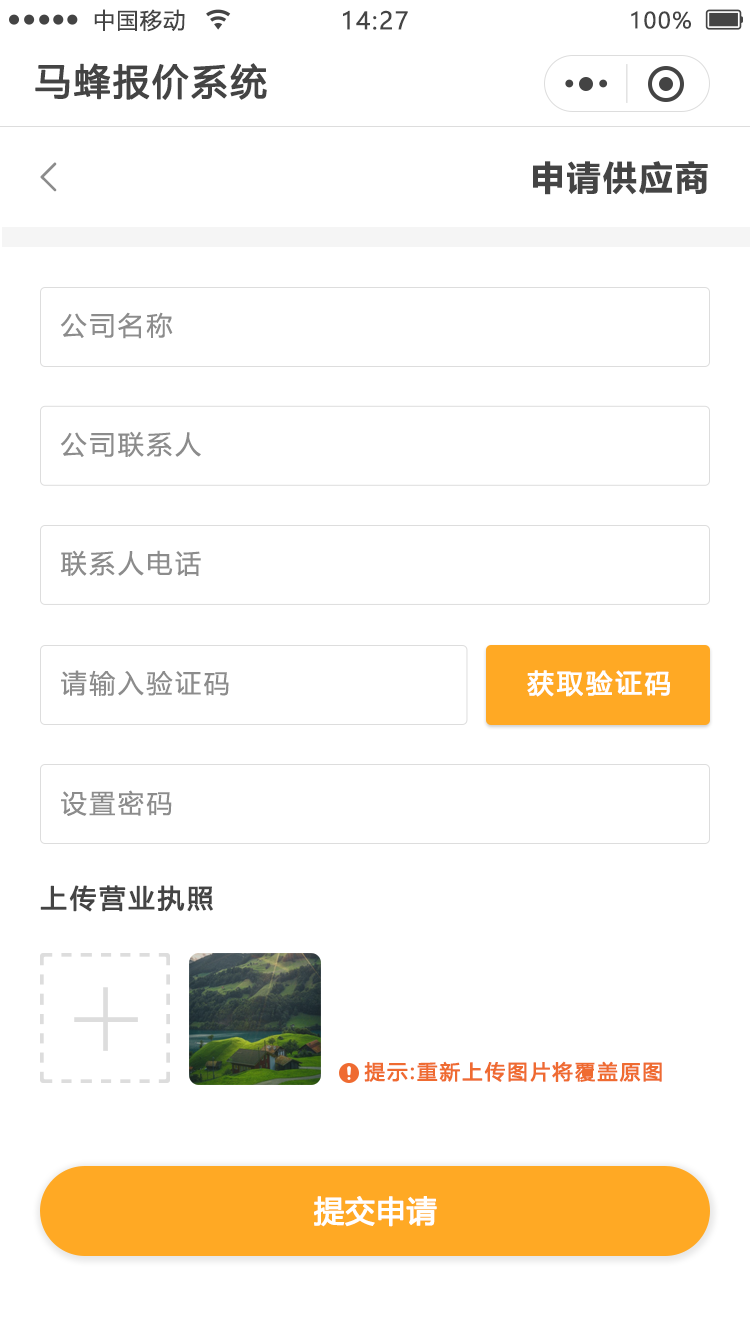
<style>
.page{position:relative;width:750px;height:1334px;background:#ffffff}
.page>*{position:absolute;margin:0}
.t1{font:22px "MicrosoftYaHeiUI";letter-spacing:0.06em;color:#444444}
.t2{font:24px "MicrosoftYaHeiUI";letter-spacing:0.06em;color:#444444}
.t3{font:36px "MicrosoftYaHeiUI";letter-spacing:0.06em;color:#444444;font-weight:bold}
.t4{font:34px "MicrosoftYaHeiUI-Bold";letter-spacing:0.06em;color:#444444}
.t5{font:40px "FangSong";letter-spacing:0.1em;color:#8c8c8c;font-weight:bold}
.t6{font:26px "MicrosoftYaHeiUI";letter-spacing:0.1em;color:#8c8c8c}
.t7{font:26px "MicrosoftYaHeiUI";letter-spacing:0.1em;color:#ffffff;font-weight:bold}
.t8{font:26px "MicrosoftYaHeiUI";letter-spacing:0.1em;color:#444444;font-weight:bold}
.t9{font:20px "MicrosoftYaHeiUI";letter-spacing:0.1em;color:#ef6b31;font-weight:bold}
.t10{font:30px "MicrosoftYaHeiUI";color:#ffffff;font-weight:bold}
</style>
<div class="page">
<p class="t1" style="left:94px;top:9px;width:91px;height:23px">中国移动</p>
<p class="t2" style="left:343px;top:10px;width:65px;height:20px">14:27</p>
<p class="t1" style="left:631px;top:11px;width:60px;height:18px">100%</p>
<p class="t3" style="left:35px;top:63px;width:232px;height:37px">马蜂报价系统</p>
<p class="t4" style="left:533px;top:161px;width:175px;height:34px">申请供应商</p>
<p class="t5" style="left:40px;top:162px;width:17px;height:30px">&lt;</p>
<p class="t6" style="left:60px;top:312px;width:113px;height:27px">公司名称</p>
<p class="t6" style="left:60px;top:431px;width:141px;height:26px">公司联系人</p>
<p class="t6" style="left:60px;top:550px;width:141px;height:26px">联系人电话</p>
<p class="t6" style="left:61px;top:670px;width:168px;height:26px">请输入验证码</p>
<p class="t7" style="left:527px;top:670px;width:143px;height:27px">获取验证码</p>
<p class="t6" style="left:61px;top:790px;width:111px;height:26px">设置密码</p>
<p class="t8" style="left:40px;top:885px;width:173px;height:27px">上传营业执照</p>
<p class="t9" style="left:364px;top:1061px;width:298px;height:21px">提示:重新上传图片将覆盖原图</p>
<p class="t10" style="left:314px;top:1196px;width:123px;height:31px">提交申请</p>
</div>
